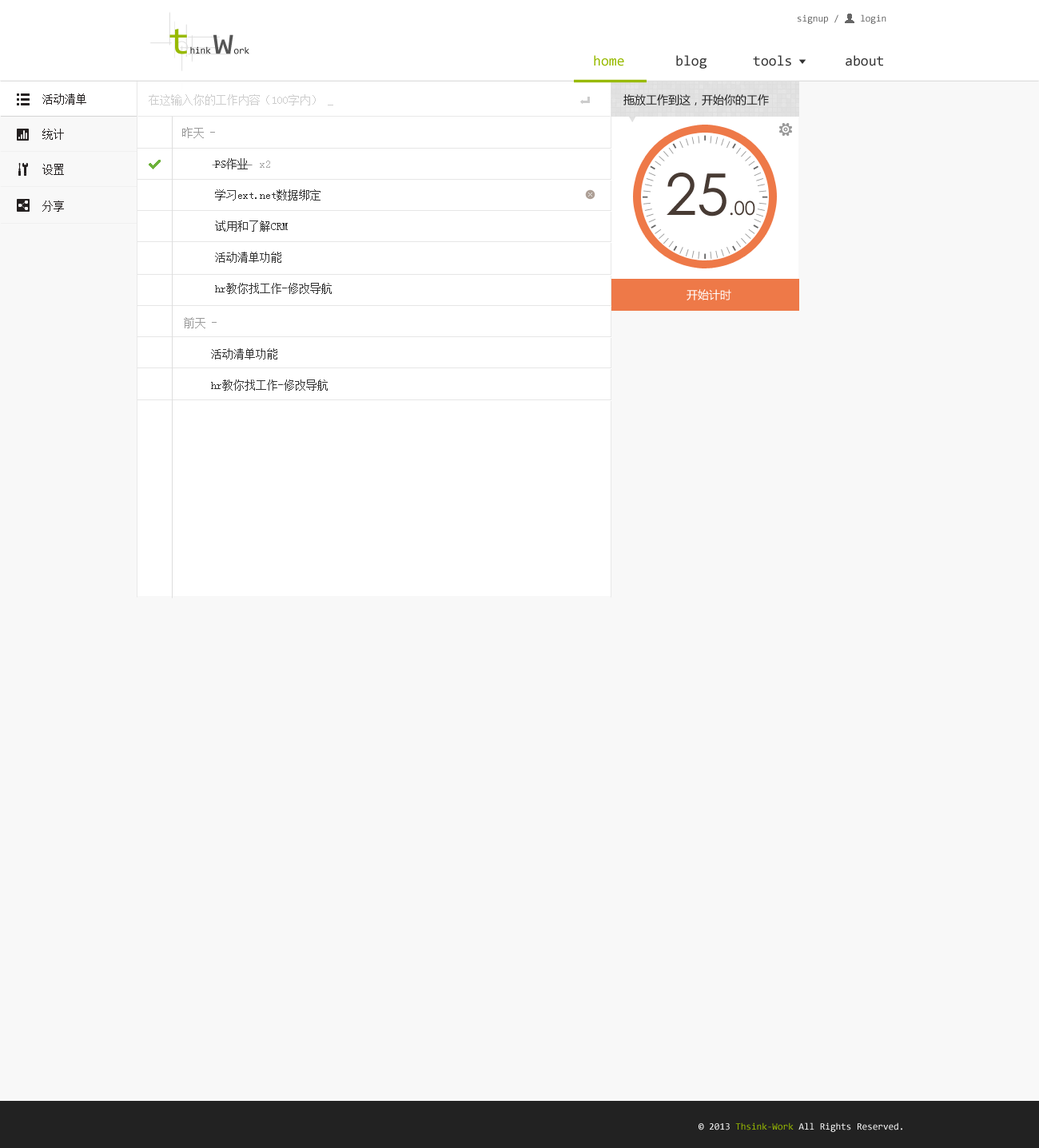
<style>
.page{position:relative;width:1039px;height:1148px;background:#f8f8f8}
.page>*{position:absolute;margin:0}
.t1{font:9.6px "Consolas";color:#666666}
.t2{font:14.4px "Consolas";color:#98ba01}
.t3{font:14.4px "Consolas";color:#333333}
.t4{font:11.2px "SimSun";color:#242020}
.t5{font:11.2px "SimSun";color:#cccccc}
.t6{font:11.2px "MicrosoftYaHei";color:#222222}
.t7{font:11.2px "SimSun";color:#999999}
.t8{font:11.2px/31.2px "SimSun";color:#333333}
.t9{font:11.2px/31.2px "SimSun";color:#aaaaaa}
.t10{font:19.2px "CenturyGothic";color:#483b34}
.t11{font:57.5px "CenturyGothic";color:#483b34}
.t12{font:11.2px "MicrosoftYaHei";color:#ffffff}
.t13{font:9.6px "Consolas";color:#ffffff}
.t14{font:9.6px "Consolas";color:#98ba01}
</style>
<div class="page">
<p class="t1" style="left:797px;top:14px;width:89px;height:10px">signup /    login</p>
<p class="t2" style="left:594px;top:55px;width:30px;height:11px">home</p>
<p class="t3" style="left:676px;top:55px;width:30px;height:14px">blog</p>
<p class="t3" style="left:753px;top:55px;width:38px;height:11px">tools</p>
<p class="t3" style="left:845px;top:55px;width:38px;height:11px">about</p>
<p class="t4" style="left:42px;top:93px;width:44px;height:12px">活动清单</p>
<p class="t5" style="left:149px;top:94px;width:184px;height:11px">在这输入你的工作内容（100字内） _</p>
<p class="t6" style="left:623px;top:94px;width:146px;height:11px">拖放工作到这，开始你的工作</p>
<p class="t4" style="left:42px;top:129px;width:22px;height:11px">统计</p>
<p class="t7" style="left:182px;top:127px;width:33px;height:11px">昨天 -</p>
<p class="t8" style="left:215px;top:158px;width:117px;height:136px">PS作业<span class="t9">  x2<br></span>学习ext.net数据绑定<br>试用和了解CRM<br>活动清单功能<br>hr教你找工作-修改导航</p>
<p class="t4" style="left:42px;top:164px;width:22px;height:11px">设置</p>
<p class="t10" style="left:666px;top:173px;width:89px;height:44px"><span class="t11">25</span>.00</p>
<p class="t4" style="left:42px;top:201px;width:22px;height:11px">分享</p>
<p class="t12" style="left:686px;top:289px;width:45px;height:11px">开始计时</p>
<p class="t7" style="left:184px;top:317px;width:33px;height:11px">前天 -</p>
<p class="t8" style="left:211px;top:348px;width:117px;height:43px">活动清单功能<br>hr教你找工作-修改导航</p>
<p class="t13" style="left:698px;top:1123px;width:204px;height:9px">© 2013 <span class="t14">Thsink-Work</span> All Rights Reserved.</p>
</div>
